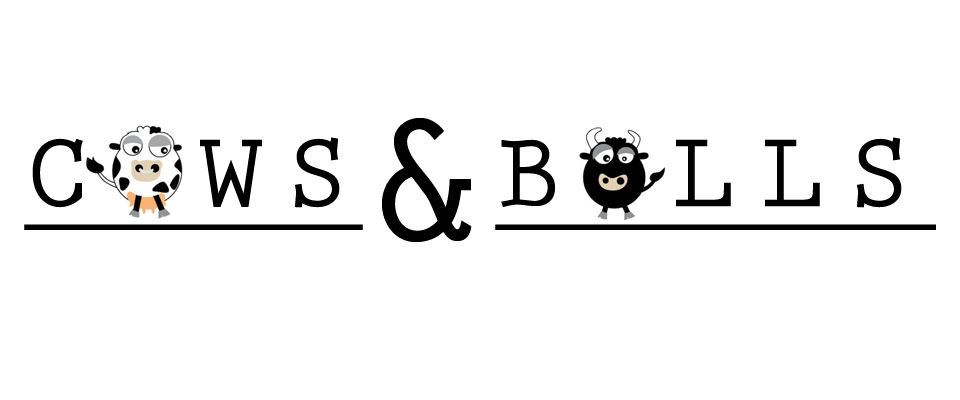
<style>
.page{position:relative;width:960px;height:400px;background:#ffffff}
.page>*{position:absolute;margin:0}
.t1{font:110px "PrestigeEliteStd-Bd";letter-spacing:0.22em;color:#000000;text-decoration:underline}
.t2{font:200px "PrestigeEliteStd-Bd";letter-spacing:0.07em;color:#000000}
</style>
<div class="page">
<p class="t1" style="left:24px;top:117px;width:912px;height:125px">COWS<span class="t2">&amp;</span>BULLS</p>
</div>
